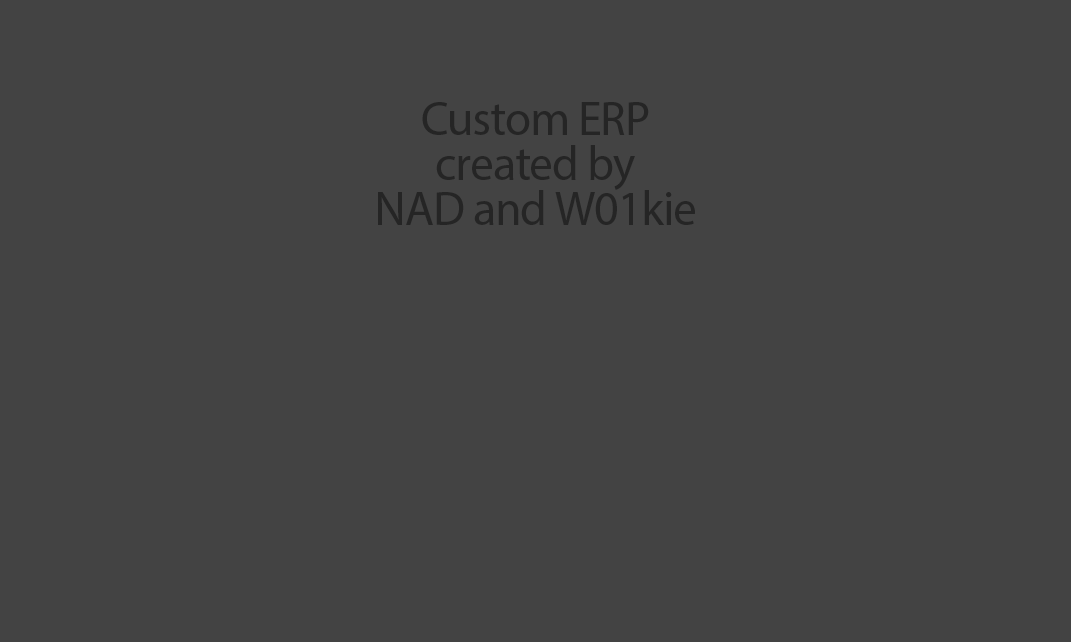
<style>
.page{position:relative;width:1071px;height:642px;background:#434343}
.page>*{position:absolute;margin:0}
.t1{font:48px/45px "MyriadPro-Regular";letter-spacing:-0.025em;color:#252525}
</style>
<div class="page">
<p class="t1" style="left:378px;top:102px;width:317px;height:123px;text-align:center">Custom ERP<br>created by<br>NAD and W01kie</p>
</div>
